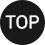
<style>
.page{position:relative;width:45px;height:45px;background:#191919}
.page>*{position:absolute;margin:0}
.t1{font:18.1px "NanumSquareB";color:#ffffff}
</style>
<div class="page">
<p class="t1" style="left:5px;top:15px;width:34px;height:14px">TOP</p>
</div>
